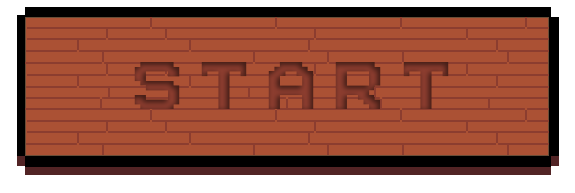
<style>
.page{position:relative;width:575px;height:193px;background:#ab5134}
.page>*{position:absolute;margin:0}
.t1{font:94.4px "Pixeboy";letter-spacing:0.14em;color:#783428;scale:1.17 1}
</style>
<div class="page">
<p class="t1" style="left:134px;top:62px;width:315px;height:47px">START</p>
</div>
